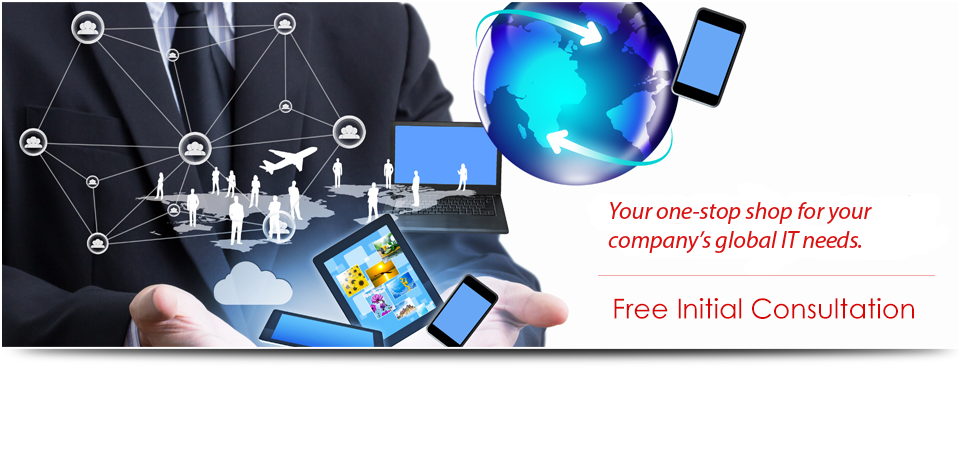
<style>
.page{position:relative;width:960px;height:451px;background:#ffffff}
.page>*{position:absolute;margin:0}
.t1{font:24px "MyriadPro-It";color:#db1212}
</style>
<div class="page">
<p class="t1" style="left:608px;top:202px;width:264px;height:52px">Your one-stop shop for your<br>company’s global IT needs.</p>
</div>
